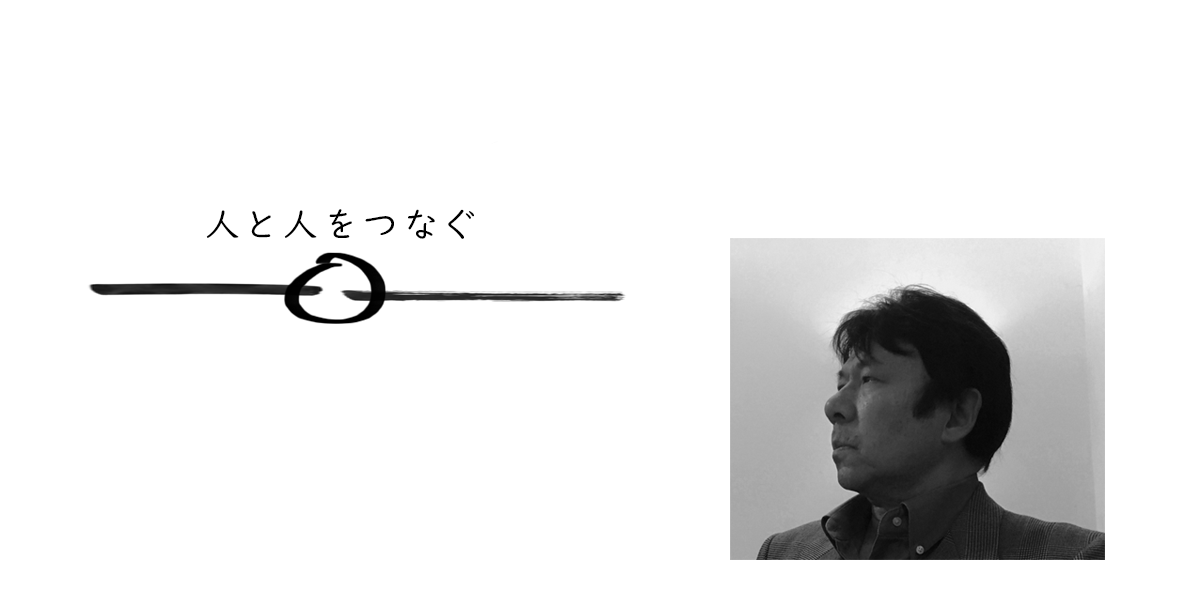
<style>
.page{position:relative;width:1200px;height:603px;background:#ffffff}
.page>*{position:absolute;margin:0}
.t1{font:36px "UDDigiKyokashoNK-R";letter-spacing:0.2em;color:#000000}
</style>
<div class="page">
<p class="t1" style="left:206px;top:209px;width:268px;height:30px">人と人をつなぐ</p>
</div>
